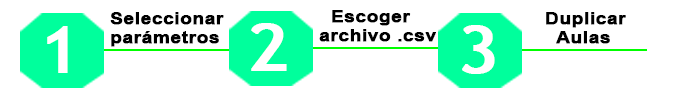
<style>
.page{position:relative;width:700px;height:100px;background:#ffffff}
.page>*{position:absolute;margin:0}
.t1{font:15.6px "Arial-BoldMT";color:#000000;font-weight:bold;scale:1.23 1}
.t2{font:64.5px "TrebuchetMS";color:#ffffff;font-weight:bold;scale:1.16 1}
</style>
<div class="page">
<p class="t1" style="left:110px;top:12px;width:114px;height:35px">Seleccionar<br>parámetros</p>
<p class="t1" style="left:319px;top:10px;width:117px;height:32px">Escoger<br>archivo .csv</p>
<p class="t1" style="left:546px;top:12px;width:80px;height:32px">Duplicar<br>   Aulas</p>
<p class="t2" style="left:47px;top:26px;width:21px;height:47px">1</p>
<p class="t2" style="left:251px;top:23px;width:36px;height:48px">2</p>
<p class="t2" style="left:462px;top:25px;width:33px;height:49px">3</p>
</div>
